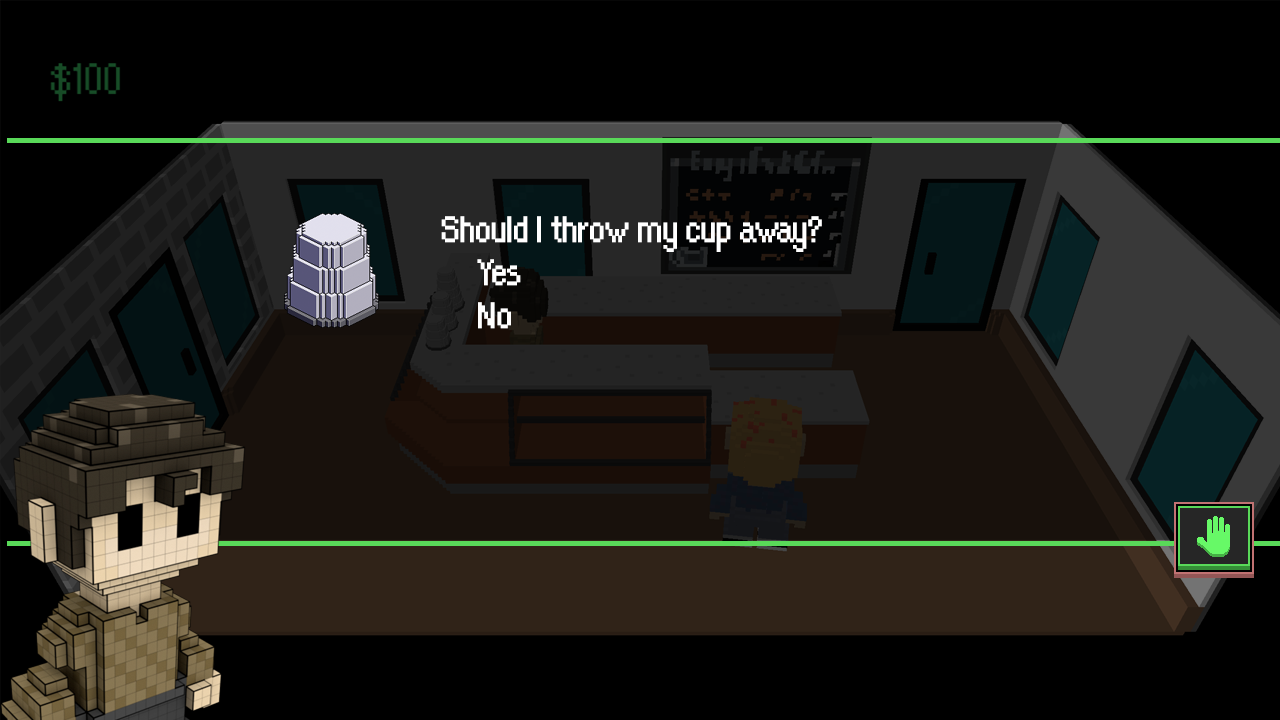
<style>
.page{position:relative;width:1280px;height:720px;background:#000000}
.page>*{position:absolute;margin:0}
.t1{font:40px/43px "OrangeKid";letter-spacing:-0.01em;color:#ffffff}
</style>
<div class="page">
<p class="t1" style="left:441px;top:216px;width:381px;height:113px">Should I throw my cup away?<br> Yes<br> No</p>
</div>
